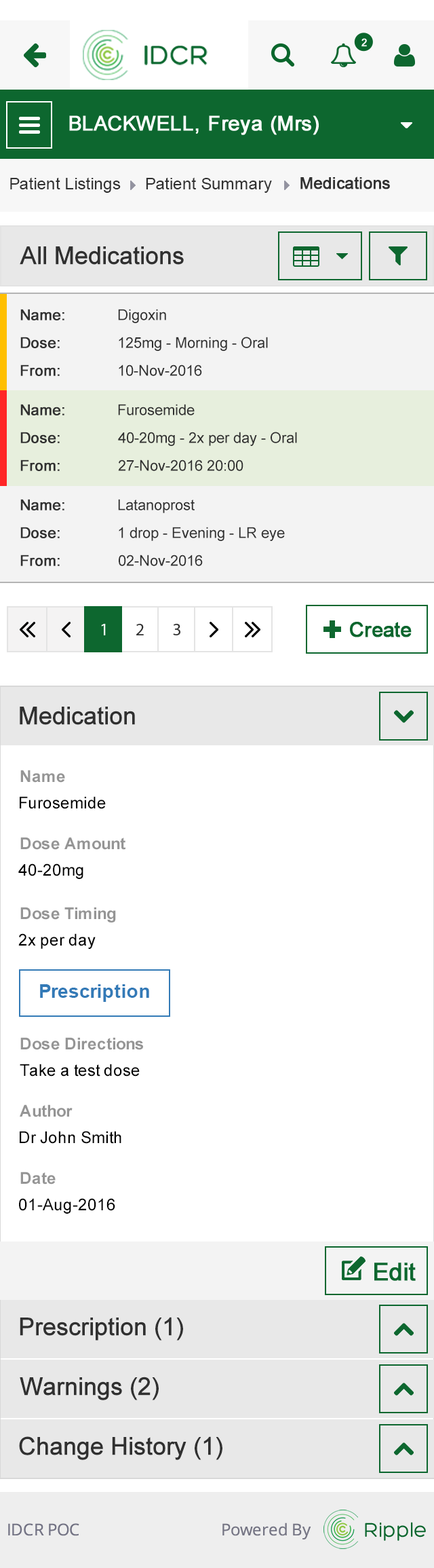
<style>
.page{position:relative;width:434px;height:1568px;background:#ffffff}
.page>*{position:absolute;margin:0}
.t1{font:16.3px "ArialMT";color:#313131}
.t2{font:16.3px "ArialMT";color:#313131;font-weight:bold}
.t3{font:24.4px "ArialMT";color:#303030;font-weight:bold}
.t4{font:14.9px "ArialMT";color:#303030;font-weight:bold}
.t5{font:14.9px "ArialMT";color:#303030}
.t6{font:16.3px "Arial-BoldMT";color:#959595}
.t7{font:16.3px "ArialMT";color:#000000}
.t8{font:19px "Arial-BoldMT";color:#337ab7}
</style>
<div class="page">
<p class="t1" style="left:10px;top:177px;width:111px;height:16px">Patient Listings</p>
<p class="t1" style="left:146px;top:177px;width:126px;height:16px">Patient Summary</p>
<p class="t2" style="left:301px;top:176px;width:89px;height:13px">Medications</p>
<p class="t3" style="left:20px;top:246px;width:164px;height:19px">All Medications</p>
<p class="t4" style="left:20px;top:309px;width:44px;height:11px">Name:</p>
<p class="t5" style="left:118px;top:309px;width:48px;height:14px">Digoxin</p>
<p class="t4" style="left:20px;top:337px;width:40px;height:11px">Dose:</p>
<p class="t5" style="left:119px;top:337px;width:149px;height:14px">125mg - Morning - Oral</p>
<p class="t4" style="left:20px;top:365px;width:40px;height:11px">From:</p>
<p class="t5" style="left:119px;top:365px;width:83px;height:11px">10-Nov-2016</p>
<p class="t4" style="left:20px;top:404px;width:44px;height:11px">Name:</p>
<p class="t5" style="left:118px;top:404px;width:77px;height:11px">Furosemide</p>
<p class="t4" style="left:20px;top:432px;width:40px;height:11px">Dose:</p>
<p class="t5" style="left:118px;top:432px;width:179px;height:14px">40-20mg - 2x per day - Oral</p>
<p class="t4" style="left:20px;top:460px;width:40px;height:11px">From:</p>
<p class="t5" style="left:118px;top:460px;width:126px;height:11px">27-Nov-2016 20:00</p>
<p class="t4" style="left:20px;top:499px;width:44px;height:11px">Name:</p>
<p class="t5" style="left:118px;top:499px;width:77px;height:14px">Latanoprost</p>
<p class="t4" style="left:20px;top:527px;width:40px;height:11px">Dose:</p>
<p class="t5" style="left:119px;top:527px;width:166px;height:14px">1 drop - Evening - LR eye</p>
<p class="t4" style="left:20px;top:555px;width:40px;height:11px">From:</p>
<p class="t5" style="left:119px;top:555px;width:84px;height:11px">02-Nov-2016</p>
<p class="t3" style="left:20px;top:707px;width:115px;height:18px">Medication</p>
<p class="t6" style="left:20px;top:770px;width:45px;height:13px">Name</p>
<p class="t7" style="left:20px;top:796px;width:86px;height:13px">Furosemide</p>
<p class="t6" style="left:20px;top:837px;width:106px;height:13px">Dose Amount</p>
<p class="t7" style="left:18px;top:863px;width:65px;height:16px">40-20mg</p>
<p class="t6" style="left:20px;top:907px;width:96px;height:15px">Dose Timing</p>
<p class="t7" style="left:18px;top:933px;width:78px;height:16px">2x per day</p>
<p class="t8" style="left:40px;top:984px;width:109px;height:18px">Prescription</p>
<p class="t6" style="left:20px;top:1037px;width:123px;height:13px">Dose Directions</p>
<p class="t7" style="left:20px;top:1064px;width:120px;height:13px">Take a test dose</p>
<p class="t6" style="left:20px;top:1104px;width:53px;height:13px">Author</p>
<p class="t7" style="left:20px;top:1131px;width:102px;height:13px">Dr John Smith</p>
<p class="t6" style="left:20px;top:1172px;width:36px;height:12px">Date</p>
<p class="t7" style="left:19px;top:1198px;width:96px;height:16px">01-Aug-2016</p>
<p class="t3" style="left:20px;top:1317px;width:163px;height:24px">Prescription (1)</p>
<p class="t3" style="left:20px;top:1377px;width:139px;height:23px">Warnings (2)</p>
<p class="t3" style="left:19px;top:1436px;width:204px;height:24px">Change History (1)</p>
</div>
